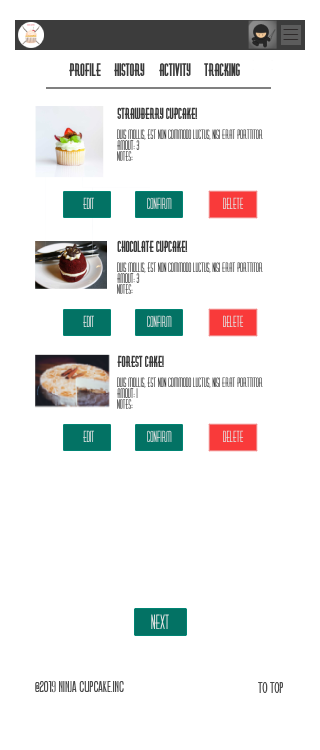
<style>
.page{position:relative;width:320px;height:750px;background:#ffffff}
.page>*{position:absolute;margin:0}
.t1{font:16px "Diner-Obese";color:#3a3a3a}
.t2{font:14px "Diner-Obese";color:#3a3a3a}
.t3{font:12px "Diner-Fatt";color:#3a3a3a}
.t4{font:14px "Diner-Fatt"}
.t5{font:14px "Diner-Fatt";color:#e3e3e3}
.t6{font:18px "Diner-Fatt";color:#e3e3e3}
.t7{font:12px "Caledo-Bold";color:#4a4a4a}
</style>
<div class="page">
<p class="t1" style="left:69px;top:63px;width:32px;height:14px">profile</p>
<p class="t1" style="left:114px;top:63px;width:31px;height:14px">history</p>
<p class="t1" style="left:159px;top:63px;width:32px;height:14px">activity</p>
<p class="t1" style="left:204px;top:63px;width:36px;height:14px">tracking</p>
<p class="t2" style="left:117px;top:107px;width:81px;height:13px">strawberry cupcake!</p>
<p class="t3" style="left:117px;top:129px;width:146px;height:32px">Duis mollis, est non commodo luctus, nisi erat porttitor <br>amout: 3<br>notes:</p>
<p class="t4" style="left:83px;top:197px;width:12px;height:13px">edit</p>
<p class="t5" style="left:147px;top:197px;width:25px;height:13px">confirm</p>
<p class="t5" style="left:223px;top:197px;width:21px;height:13px">delete</p>
<p class="t2" style="left:117px;top:240px;width:71px;height:13px">chocolate cupcake!</p>
<p class="t3" style="left:117px;top:262px;width:146px;height:32px">Duis mollis, est non commodo luctus, nisi erat porttitor <br>amout: 3<br>notes:</p>
<p class="t4" style="left:83px;top:315px;width:12px;height:13px">edit</p>
<p class="t5" style="left:147px;top:315px;width:25px;height:13px">confirm</p>
<p class="t5" style="left:223px;top:315px;width:21px;height:13px">delete</p>
<p class="t2" style="left:117px;top:355px;width:47px;height:13px">forest cake!</p>
<p class="t3" style="left:117px;top:377px;width:146px;height:32px">Duis mollis, est non commodo luctus, nisi erat porttitor <br>amout: 1<br>notes:</p>
<p class="t4" style="left:83px;top:430px;width:12px;height:13px">edit</p>
<p class="t5" style="left:147px;top:430px;width:25px;height:13px">confirm</p>
<p class="t5" style="left:223px;top:430px;width:21px;height:13px">delete</p>
<p class="t6" style="left:151px;top:614px;width:18px;height:16px">next</p>
<p class="t7" style="left:35px;top:680px;width:89px;height:13px">@2019 Ninja Cupcake.inc</p>
<p class="t7" style="left:258px;top:682px;width:25px;height:11px">To Top</p>
</div>
